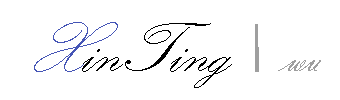
<style>
.page{position:relative;width:340px;height:100px;background:#ffffff}
.page>*{position:absolute;margin:0}
.t1{font:72px "KunstlerScript";color:#000000}
.t2{font:72px "KunstlerScript";color:#4555b6}
.t3{font:42px "VladimirScript";color:#9f9f9f}
</style>
<div class="page">
<p class="t1" style="left:34px;top:22px;width:198px;height:66px"><span class="t2">X</span>inTing</p>
<p class="t3" style="left:278px;top:60px;width:43px;height:11px">wu</p>
</div>
